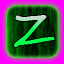
<style>
.page{position:relative;width:64px;height:64px}
.page>*{position:absolute;margin:0}
.t1{font:48px "SegoeScript"}
</style>
<div class="page">
<p class="t1" style="left:13px;top:15px;width:42px;height:32px">Z</p>
</div>
